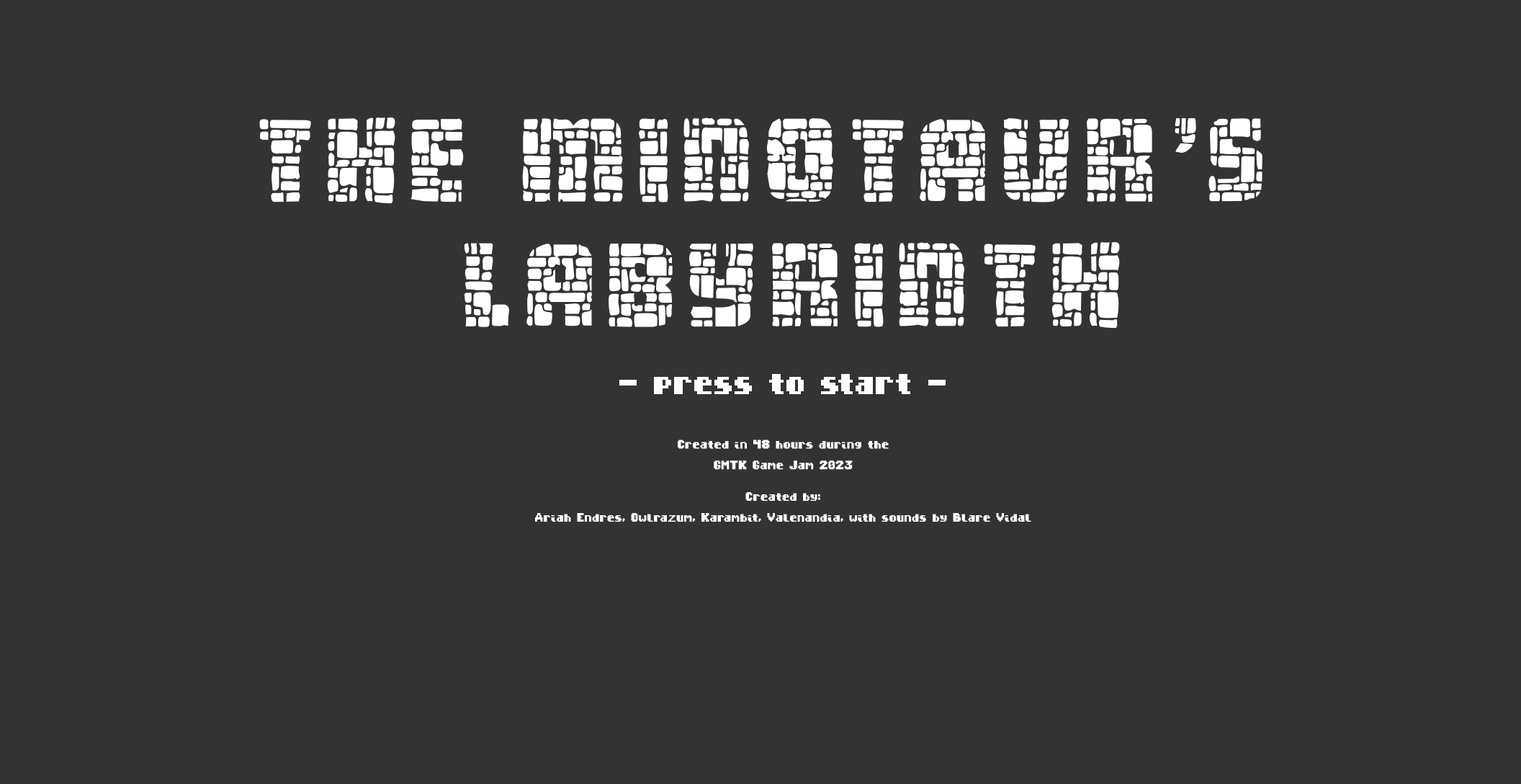
<style>
.page{position:relative;width:1521px;height:784px;background:#333333}
.page>*{position:absolute;margin:0}
.t1{font:103.7px "Dungeon-BlocksFilled";letter-spacing:0.075em;color:#ffffff}
.t2{font:103.7px "Dungeon-BlocksFilled";letter-spacing:-0.025em;color:#ffffff}
.t3{font:46.1px "DungeonChunk";color:#ffffff}
.t4{font:46.1px "DungeonChunk";letter-spacing:-0.05em;color:#ffffff}
.t5{font:17.3px "DungeonChunk";color:#ffffff}
</style>
<div class="page">
<p class="t1" style="left:259px;top:117px;width:1004px;height:211px;text-align:center">Th<span class="t2">e </span>Minotaur's <br>Labyrinth</p>
<p class="t3" style="left:620px;top:374px;width:326px;height:20px">- press to star<span class="t4">t</span> -</p>
<p class="t5" style="left:678px;top:439px;width:211px;height:31px;text-align:center">Created in 48 hours during the<br>GMTK Game Jam 2023</p>
<p class="t5" style="left:535px;top:492px;width:497px;height:30px;text-align:center">Created by:<br>Ariah Endres, Owlrazum, Karambit, Valenandia, with sounds by Blare Vidal</p>
</div>
